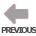
<style>
.page{position:relative;width:36px;height:36px;background:#ffffff}
.page>*{position:absolute;margin:0}
.t1{font:8px "Verdana-Bold";letter-spacing:-0.2em;color:#505050}
</style>
<div class="page">
<p class="t1" style="left:1px;top:27px;width:36px;height:6px">PREVIOUS</p>
</div>
